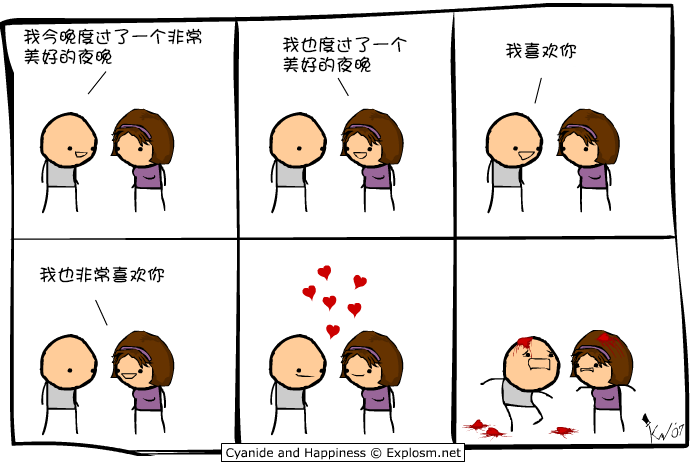
<style>
.page{position:relative;width:691px;height:468px;background:#ffffff}
.page>*{position:absolute;margin:0}
.t1{font:18px/20px "DFGirl";color:#000000}
.t2{font:18px "DFGirl";color:#000000}
</style>
<div class="page">
<p class="t1" style="left:23px;top:28px;width:179px;height:37px">我今晚度过了一个非常<br>美好的夜晚</p>
<p class="t1" style="left:282px;top:36px;width:125px;height:37px">我也度过了一个<br>美好的夜晚</p>
<p class="t2" style="left:505px;top:42px;width:72px;height:17px">我喜欢你</p>
<p class="t2" style="left:39px;top:266px;width:126px;height:17px">我也非常喜欢你</p>
</div>
